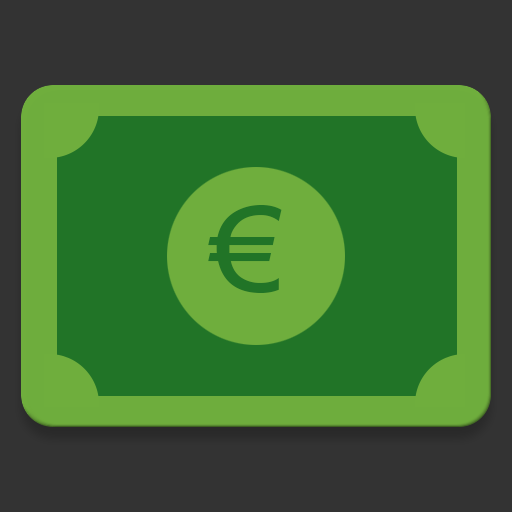
<style>
.page{position:relative;width:512px;height:512px;background:#333333}
.page>*{position:absolute;margin:0}
.t1{font:120px "ArialMT";color:#217427;scale:1.1 1}
</style>
<div class="page">
<p class="t1" style="left:208px;top:205px;width:74px;height:88px">€</p>
</div>
